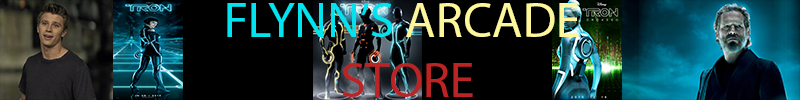
<style>
.page{position:relative;width:800px;height:100px;background:#000000}
.page>*{position:absolute;margin:0}
.t1{font:12px "MyriadPro-Regular";color:#01e3ee}
.t2{font:12px "MyriadPro-Regular";color:#fdf69b}
.t3{font:12px "MyriadPro-Regular";color:#ba2425}
</style>
<div class="page">
<p class="t1" style="left:227px;top:3px;width:352px;height:94px">FLYNN’S<span class="t2"> ARCADE<br>           </span><span class="t3">STORE</span></p>
</div>
